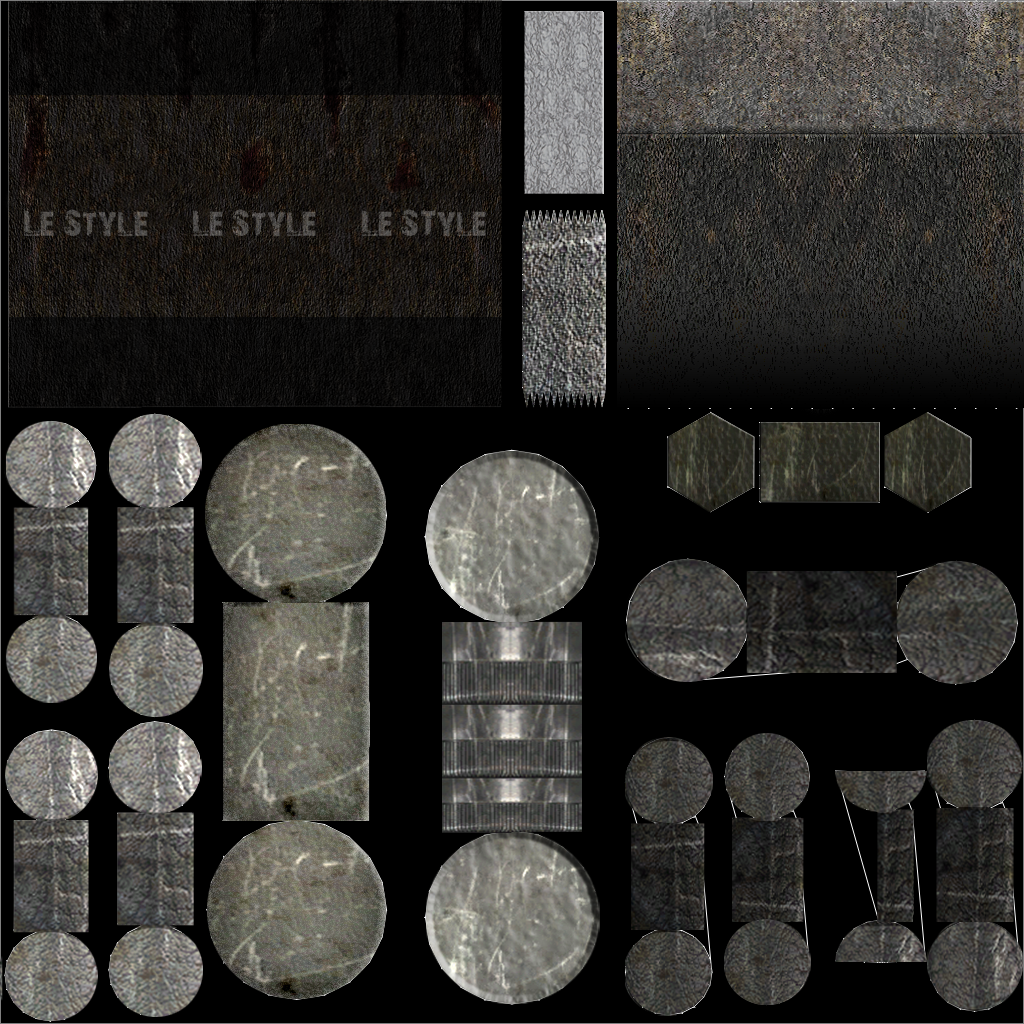
<style>
.page{position:relative;width:1024px;height:1024px;background:#000000}
.page>*{position:absolute;margin:0}
.t1{font:36px "28-Days-Later-Regular";color:#52504d}
</style>
<div class="page">
<p class="t1" style="left:24px;top:209px;width:462px;height:28px">Le- Style     Le Style     Le STyle</p>
</div>
